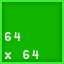
<style>
.page{position:relative;width:64px;height:64px;background:#11b400}
.page>*{position:absolute;margin:0}
.t1{font:14.7px/18.7px "Fixedsys";color:#ededed}
</style>
<div class="page">
<p class="t1" style="left:5px;top:32px;width:34px;height:27px">64<br>x 64</p>
</div>
